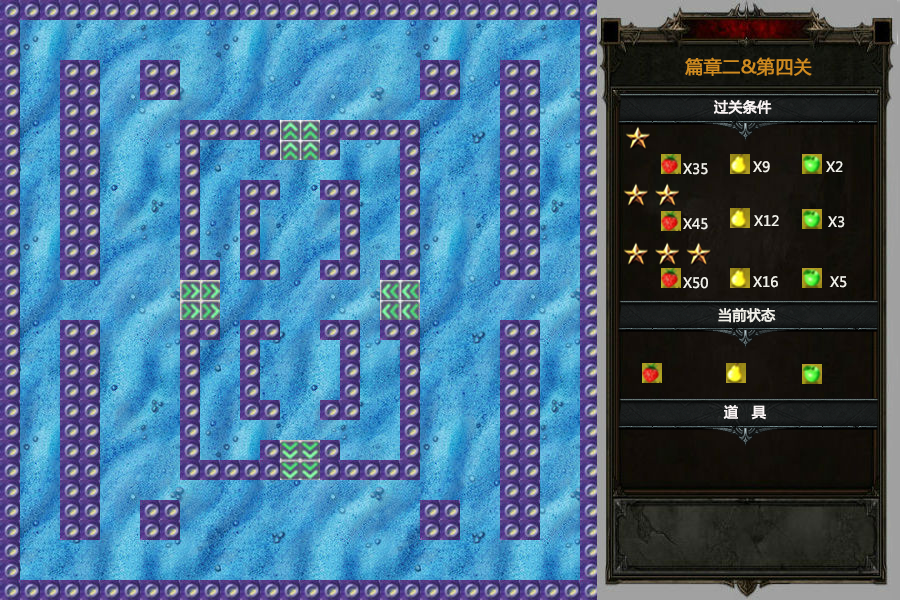
<style>
.page{position:relative;width:900px;height:600px}
.page>*{position:absolute;margin:0}
.t1{font:18px "MicrosoftYaHei";color:#cf8b20;font-weight:bold}
.t2{font:14px "MicrosoftYaHei";color:#f9f3f3;font-weight:bold}
.t3{font:14px "MicrosoftYaHei";color:#f1f0e9}
.t4{font:14px "MicrosoftYaHei";color:#f1f0e9;font-weight:bold}
</style>
<div class="page">
<p class="t1" style="left:685px;top:57px;width:127px;height:19px">篇章二&amp;第四关</p>
<p class="t2" style="left:714px;top:100px;width:58px;height:15px">过关条件</p>
<p class="t3" style="left:753px;top:161px;width:17px;height:12px">X9</p>
<p class="t3" style="left:826px;top:161px;width:17px;height:11px">X2</p>
<p class="t3" style="left:683px;top:163px;width:25px;height:12px">X35</p>
<p class="t3" style="left:683px;top:218px;width:25px;height:12px">X45</p>
<p class="t3" style="left:754px;top:215px;width:25px;height:11px">X12</p>
<p class="t3" style="left:828px;top:216px;width:17px;height:12px">X3</p>
<p class="t3" style="left:683px;top:277px;width:25px;height:12px">X50</p>
<p class="t3" style="left:753px;top:276px;width:25px;height:12px">X16</p>
<p class="t3" style="left:830px;top:276px;width:17px;height:12px">X5</p>
<p class="t4" style="left:718px;top:308px;width:58px;height:15px">当前状态</p>
<p class="t2" style="left:723px;top:405px;width:43px;height:15px">道   具</p>
</div>
